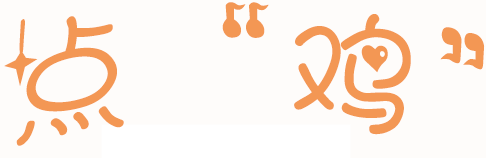
<style>
.page{position:relative;width:486px;height:158px;background:#fefcfa}
.page>*{position:absolute;margin:0}
.t1{font:140px "ET-RenXBBJ";color:#f39754;font-variant:small-caps}
</style>
<div class="page">
<p class="t1" style="left:4px;top:2px;width:481px;height:144px;rotate:3deg">点“鸡”</p>
</div>
